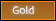
<style>
.page{position:relative;width:56px;height:21px}
.page>*{position:absolute;margin:0}
.t1{font:10px "BadComic";color:#ebebeb}
</style>
<div class="page">
<p class="t1" style="left:12px;top:6px;width:22px;height:8px">Gold</p>
</div>
